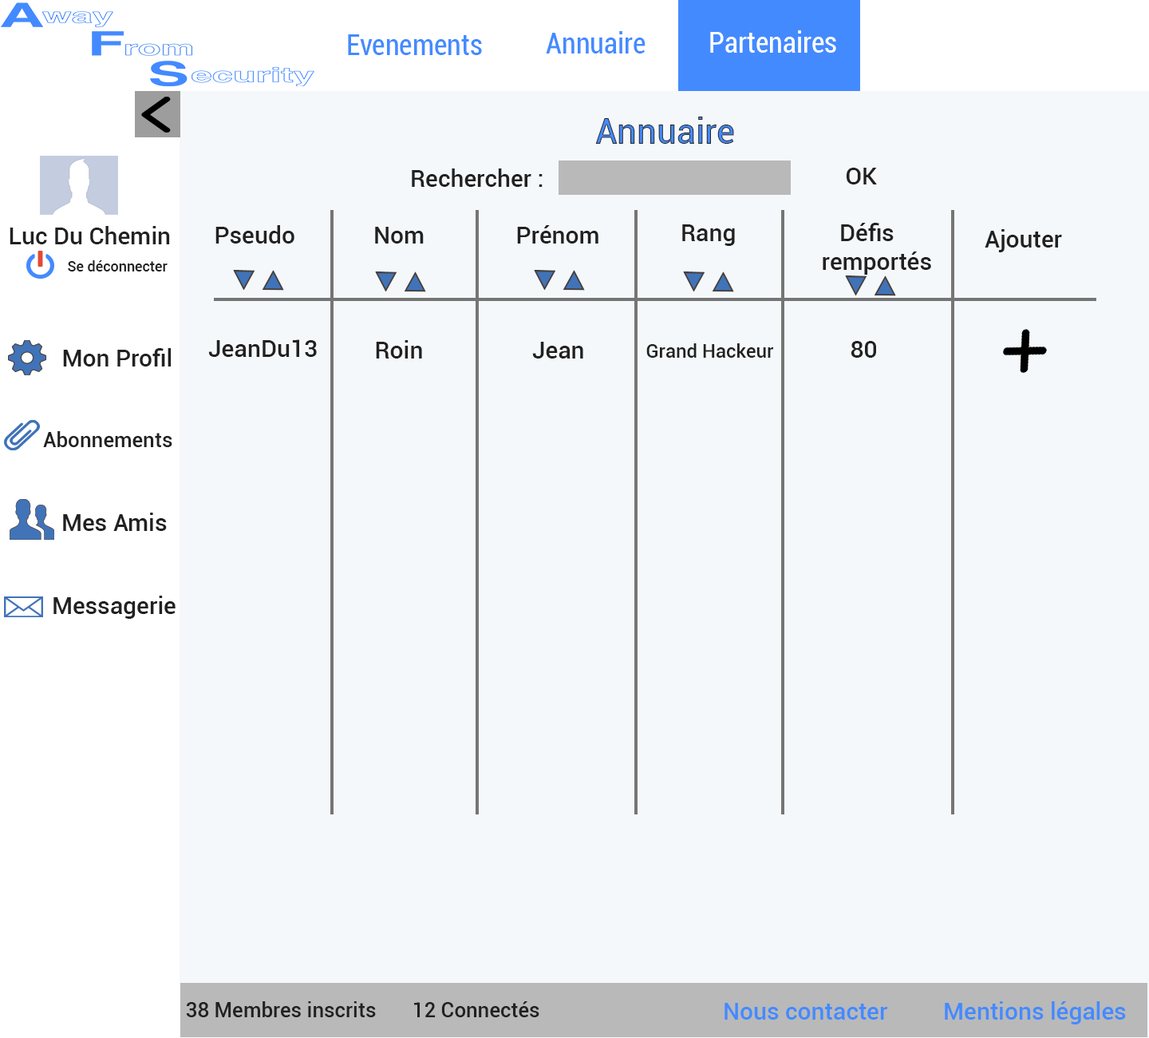
<style>
.page{position:relative;width:1149px;height:1038px;background:#f5f8fa}
.page>*{position:absolute;margin:0}
.t1{font:28.7px "Roboto-Condensed";color:#448aff}
.t2{font:28.7px "Roboto-Condensed";color:#ffffff}
.t3{font:35.1px "Roboto-Medium"}
.t4{font:23.9px "Roboto-Medium";color:#212121}
.t5{font:14.4px "Roboto-Medium";color:#212121}
.t6{font:19.2px "Roboto-Medium";color:#212121}
.t7{font:20.8px "Roboto-Medium";color:#212121}
.t8{font:23.9px "Roboto-Medium";color:#448aff}
</style>
<div class="page">
<p class="t1" style="left:348px;top:34px;width:134px;height:21px">Evenements</p>
<p class="t1" style="left:546px;top:31px;width:100px;height:22px">Annuaire</p>
<p class="t2" style="left:710px;top:30px;width:126px;height:23px">Partenaires</p>
<p class="t3" style="left:595px;top:117px;width:139px;height:27px">Annuaire</p>
<p class="t4" style="left:412px;top:168px;width:131px;height:19px">Rechercher :</p>
<p class="t4" style="left:847px;top:168px;width:30px;height:16px">OK</p>
<p class="t4" style="left:10px;top:226px;width:160px;height:18px">Luc Du Chemin</p>
<p class="t4" style="left:215px;top:225px;width:80px;height:18px">Pseudo</p>
<p class="t4" style="left:375px;top:227px;width:49px;height:16px">Nom</p>
<p class="t4" style="left:517px;top:225px;width:82px;height:18px">Prénom</p>
<p class="t4" style="left:682px;top:224px;width:53px;height:22px">Rang</p>
<p class="t4" style="left:823px;top:223px;width:108px;height:52px">Défis <br>remportés</p>
<p class="t4" style="left:985px;top:229px;width:77px;height:23px">Ajouter</p>
<p class="t5" style="left:68px;top:260px;width:100px;height:11px">Se déconnecter</p>
<p class="t4" style="left:208px;top:339px;width:109px;height:18px">JeanDu13</p>
<p class="t4" style="left:376px;top:340px;width:46px;height:18px">Roin</p>
<p class="t4" style="left:532px;top:342px;width:51px;height:16px">Jean</p>
<p class="t4" style="left:851px;top:341px;width:25px;height:17px">80</p>
<p class="t4" style="left:63px;top:348px;width:109px;height:18px">Mon Profil</p>
<p class="t6" style="left:646px;top:343px;width:128px;height:15px">Grand Hackeur</p>
<p class="t7" style="left:43px;top:431px;width:129px;height:16px">Abonnements</p>
<p class="t4" style="left:63px;top:512px;width:104px;height:19px">Mes Amis</p>
<p class="t4" style="left:53px;top:595px;width:123px;height:24px">Messagerie</p>
<p class="t7" style="left:186px;top:1001px;width:354px;height:16px">38 Membres inscrits       12 Connectés</p>
<p class="t8" style="left:945px;top:1001px;width:181px;height:23px">Mentions légales</p>
<p class="t8" style="left:725px;top:1002px;width:163px;height:17px">Nous contacter</p>
</div>
